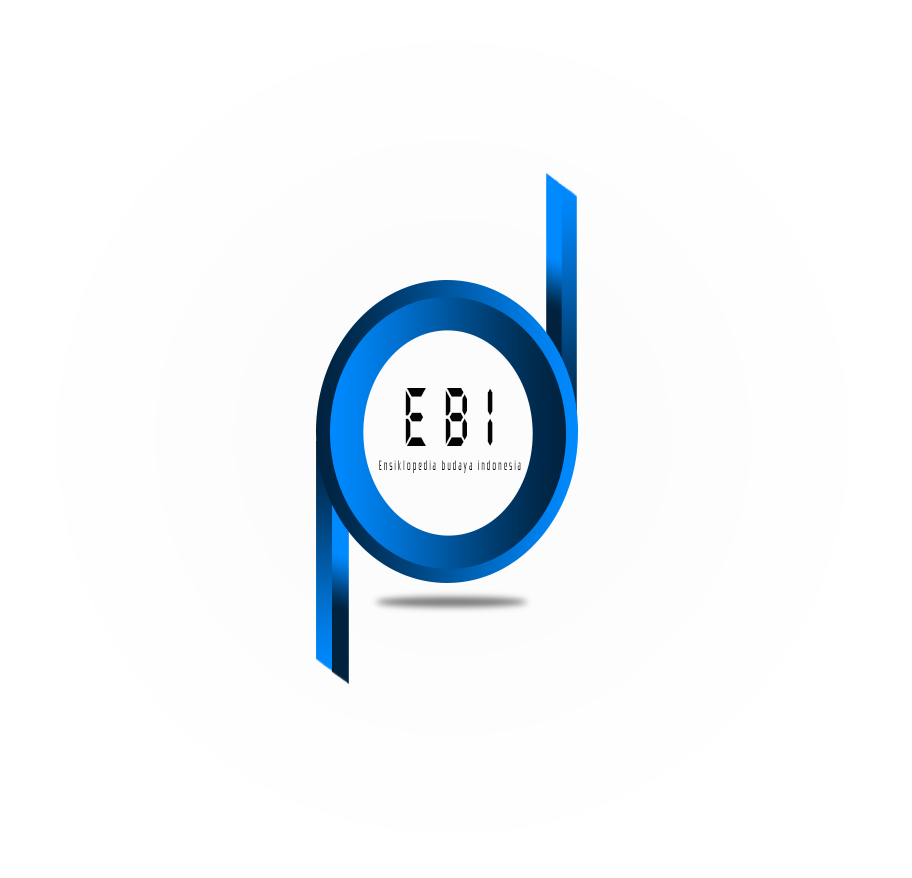
<style>
.page{position:relative;width:912px;height:878px;background:#ffffff}
.page>*{position:absolute;margin:0}
.t1{font:83px "QuartzMS";letter-spacing:0.3em;color:#040404;scale:0.55 1}
.t2{font:14.2px "Zrnic";letter-spacing:0.3em;color:#040404;scale:0.5 1}
</style>
<div class="page">
<p class="t1" style="left:405px;top:388px;width:88px;height:58px">EBI</p>
<p class="t2" style="left:379px;top:460px;width:142px;height:13px">Ensiklopedia budaya indonesia</p>
</div>
